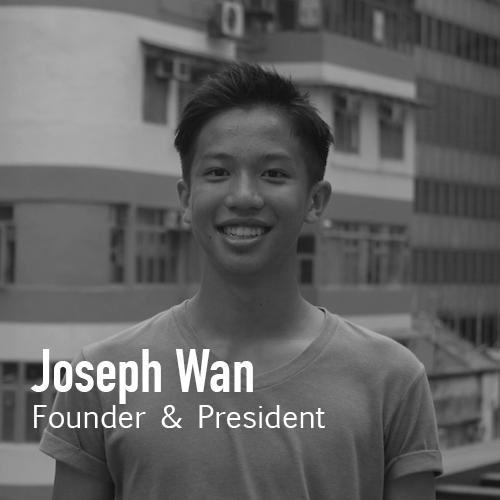
<style>
.page{position:relative;width:500px;height:500px}
.page>*{position:absolute;margin:0}
.t1{font:30px "EuphemiaUCAS";color:#ffffff}
.t2{font:60px "DINCondensed-Bold";color:#ffffff}
</style>
<div class="page">
<p class="t1" style="left:30px;top:349px;width:295px;height:79px"><span class="t2">Joseph Wan<br></span>Founder &amp; President</p>
</div>
